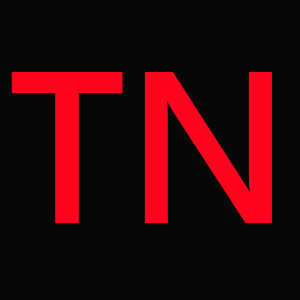
<style>
.page{position:relative;width:300px;height:300px;background:#060706}
.page>*{position:absolute;margin:0}
.t1{font:200px "MicrosoftJhengHeiBold";color:#ff041c}
</style>
<div class="page">
<p class="t1" style="left:11px;top:72px;width:261px;height:151px">TN</p>
</div>
